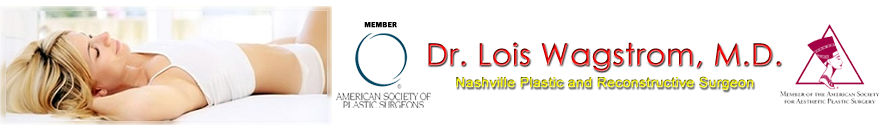
<style>
.page{position:relative;width:880px;height:131px;background:#ffffff}
.page>*{position:absolute;margin:0}
.t1{font:7.1px "FranklinGothic-Demi";letter-spacing:0.05em;color:#000000;font-weight:bold}
.t2{font:30px "CenturyGothic";font-weight:bold}
.t3{font:14px "ArialMT";font-weight:bold}
</style>
<div class="page">
<p class="t1" style="left:364px;top:22px;width:33px;height:6px">MEMBER</p>
<p class="t2" style="left:428px;top:42px;width:353px;height:30px">Dr. Lois Wagstrom, M.D.</p>
<p class="t3" style="left:456px;top:76px;width:298px;height:14px">Nashville Plastic and Reconstructive Surgeon</p>
</div>
